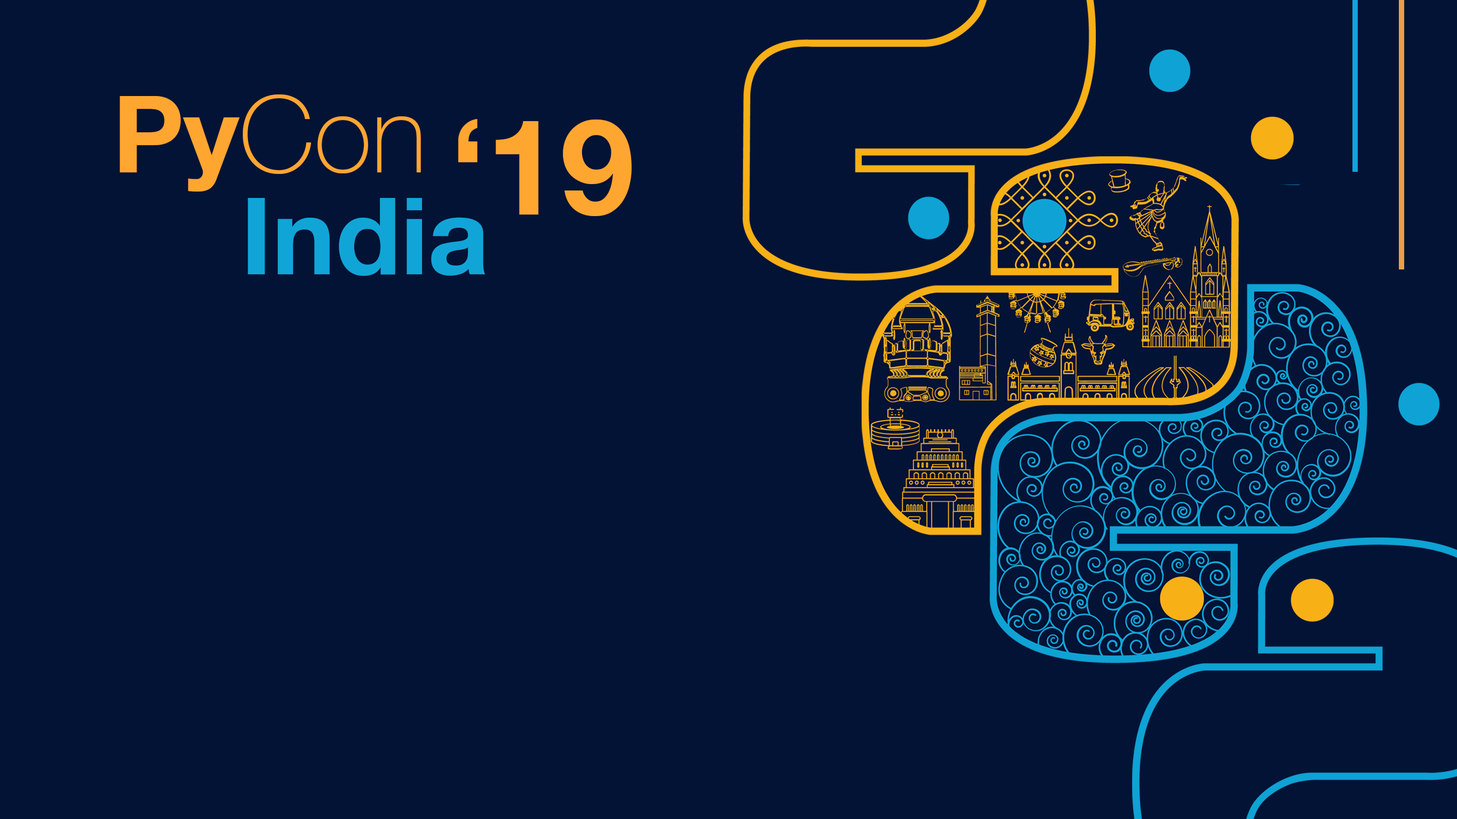
<style>
.page{position:relative;width:1457px;height:819px;background:#031335}
.page>*{position:absolute;margin:0}
.t1{font:106.7px "HelveticaNeue-Thin";color:#ffa631}
.t2{font:106.7px "HelveticaNeue-Bold";color:#ffa631}
.t3{font:133.3px "HelveticaNeue-Bold";color:#ffa631}
.t4{font:106.7px "HelveticaNeue-Bold";color:#11a5d7}
</style>
<div class="page">
<p class="t1" style="left:119px;top:94px;width:302px;height:97px"><span class="t2">Py</span>Con</p>
<p class="t3" style="left:458px;top:119px;width:173px;height:97px">‘19</p>
<p class="t4" style="left:247px;top:198px;width:238px;height:78px">India</p>
</div>
